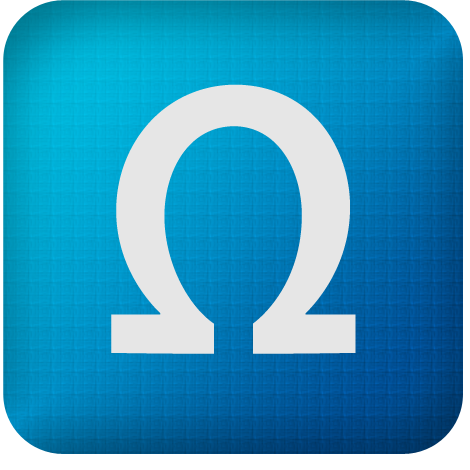
<style>
.page{position:relative;width:470px;height:470px}
.page>*{position:absolute;margin:0}
.t1{font:315px "AdobeGothicStd-Bold";color:#e6e6e6}
</style>
<div class="page">
<p class="t1" style="left:111px;top:84px;width:245px;height:270px">Ω</p>
</div>
